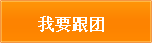
<style>
.page{position:relative;width:152px;height:43px}
.page>*{position:absolute;margin:0}
.t1{font:16px "SimSun";color:#ffffff;font-weight:bold}
</style>
<div class="page">
<p class="t1" style="left:38px;top:16px;width:66px;height:16px">我要跟团</p>
</div>
